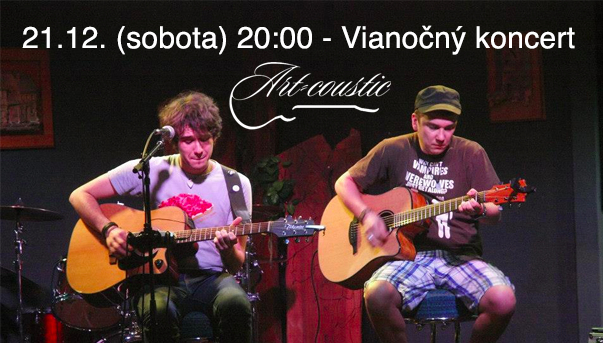
<style>
.page{position:relative;width:603px;height:343px}
.page>*{position:absolute;margin:0}
.t1{font:30px "Helvetica";letter-spacing:0.01em;color:#ffffff}
</style>
<div class="page">
<p class="t1" style="left:22px;top:25px;width:553px;height:30px">21.12. (sobota) 20:00 - Vianočný koncert</p>
</div>
